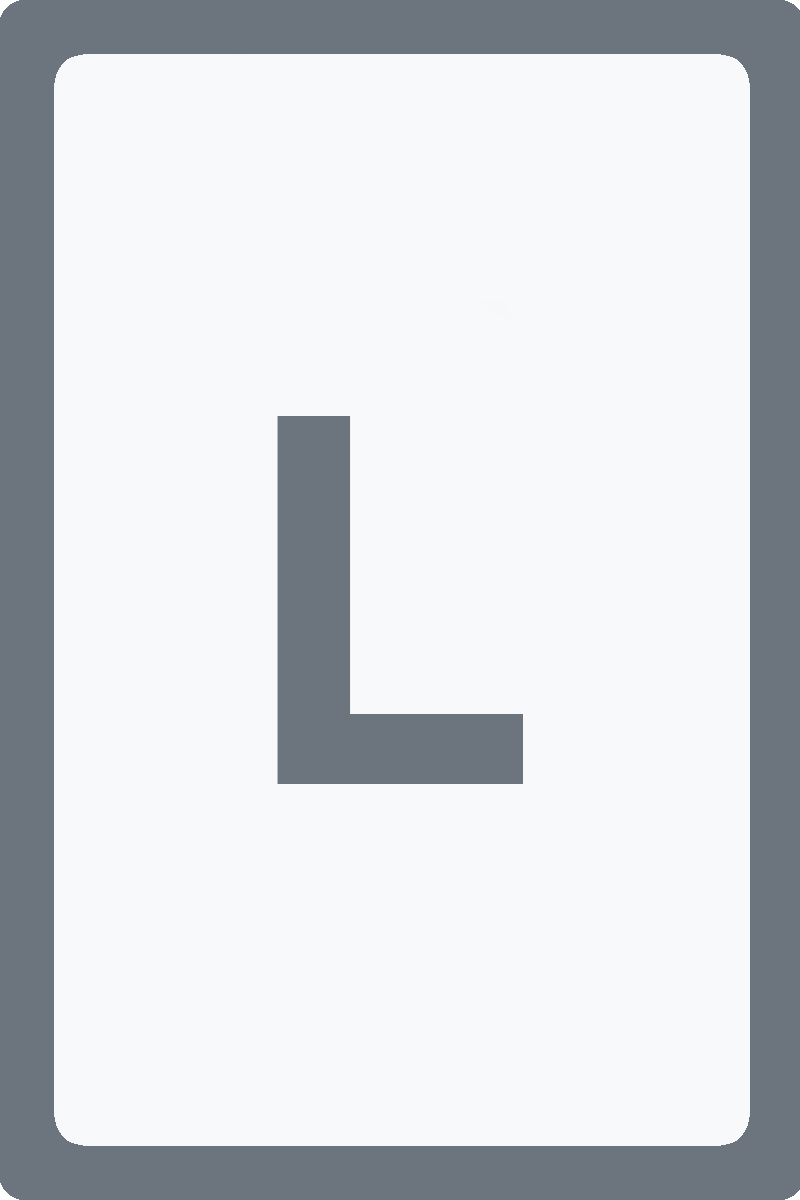
<style>
.page{position:relative;width:800px;height:1200px;background:#f8f9fa}
.page>*{position:absolute;margin:0}
.t1{font:500px "JosefinSans-Bold";color:#6c757d}
</style>
<div class="page">
<p class="t1" style="left:277px;top:416px;width:246px;height:368px">L</p>
</div>
